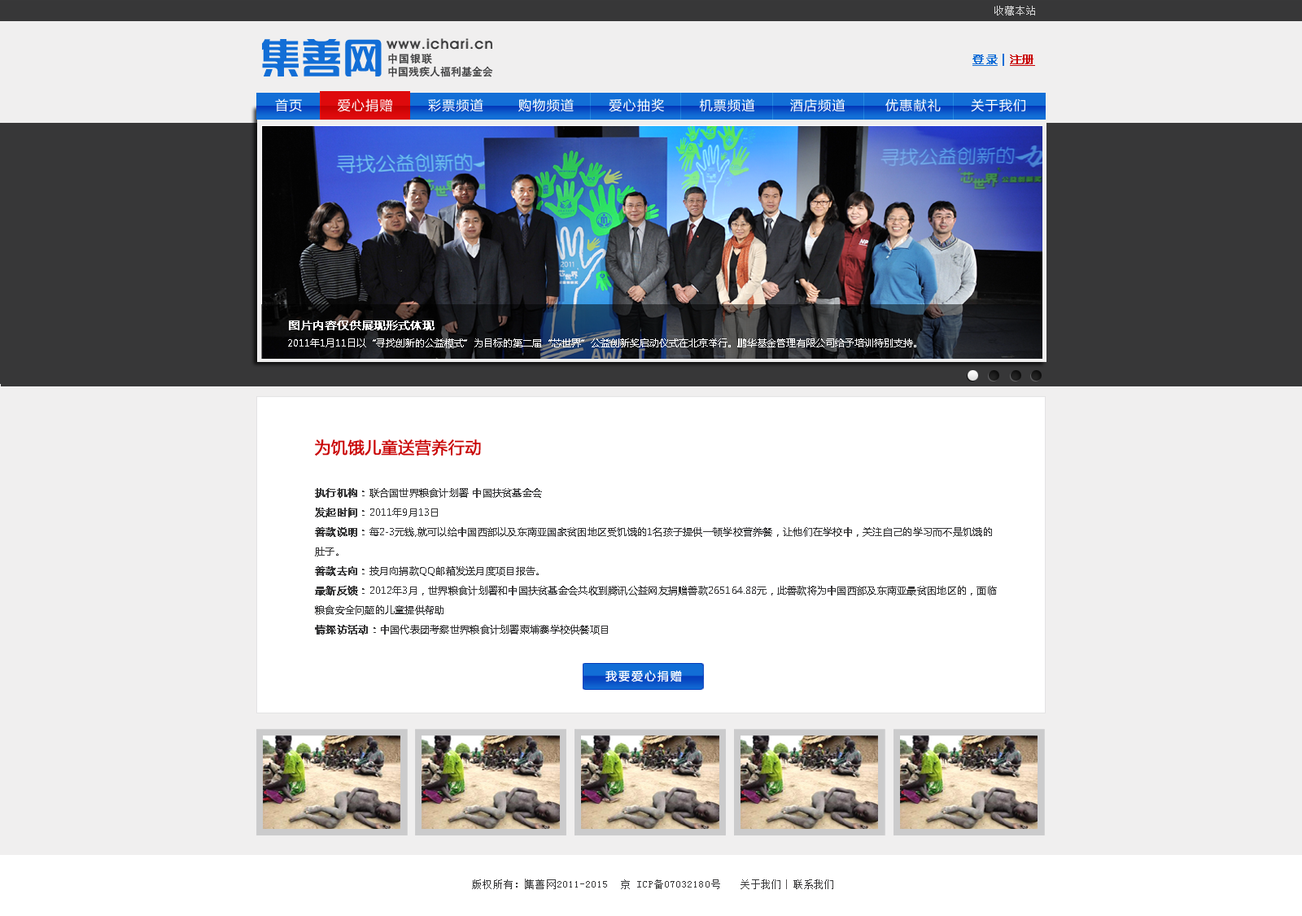
<style>
.page{position:relative;width:1302px;height:916px;background:#f0efef}
.page>*{position:absolute;margin:0}
.t1{font:9.8px "SimSun";letter-spacing:0.07em;color:#d7d7d7}
.t2{font:10.6px "HeitiCSEG-Medium-GB";letter-spacing:0.08em;color:#373738}
.t3{font:11.4px "MicrosoftYaHei";letter-spacing:0.01em;color:#126ed6;font-weight:bold;text-decoration:underline}
.t4{font:11.4px "MicrosoftYaHei";letter-spacing:0.01em;color:#126ed6;font-weight:bold}
.t5{font:11.4px "MicrosoftYaHei";letter-spacing:0.01em;color:#c90304;font-weight:bold;text-decoration:underline}
.t6{font:10.6px "HeitiCSEG-Medium-GB";color:#373738}
.t7{font:13px "MicrosoftYaHei";letter-spacing:0.08em;color:#ffffff}
.t8{font:11.4px "MicrosoftYaHei";color:#ffffff;font-weight:bold}
.t9{font:9.8px "MicrosoftYaHei";color:#ffffff}
.t10{font:16.3px "MicrosoftYaHei";color:#c90304;font-weight:bold}
.t11{font:9.8px/19.5px "MicrosoftYaHei";color:#373738}
.t12{font:9.8px/19.5px "MicrosoftYaHei";color:#373738;font-weight:bold}
.t13{font:11.4px "MicrosoftYaHei";letter-spacing:0.14em;color:#ffffff}
.t14{font:9.8px "SimSun";letter-spacing:0.09em;color:#373738}
.t15{font:9.8px "SimSun";letter-spacing:0.07em;color:#373738}
</style>
<div class="page">
<p class="t1" style="left:994px;top:6px;width:41px;height:9px">收藏本站</p>
<p class="t2" style="left:388px;top:53px;width:44px;height:11px">中国银联</p>
<p class="t3" style="left:972px;top:54px;width:63px;height:12px">登录<span class="t4"> | </span><span class="t5">注册</span></p>
<p class="t6" style="left:388px;top:66px;width:105px;height:11px">中国残疾人福利基金会</p>
<p class="t7" style="left:275px;top:98px;width:750px;height:14px">首页       爱心捐赠       彩票频道       购物频道       爱心抽奖       机票频道       酒店频道        优惠献礼      关于我们</p>
<p class="t8" style="left:289px;top:321px;width:145px;height:9px">图片内容仅供展现形式体现</p>
<p class="t9" style="left:288px;top:338px;width:628px;height:10px">2011年1月11日以“寻找创新的公益模式”为目标的第二届“芯世界”公益创新奖启动仪式在北京举行。鹏华基金管理有限公司给予培训特别支持。</p>
<p class="t10" style="left:315px;top:439px;width:166px;height:17px">为饥饿儿童送营养行动</p>
<p class="t11" style="left:315px;top:488px;width:682px;height:147px"><span class="t12">执行机构：</span>联合国世界粮食计划署 中国扶贫基金会<br><span class="t12">发起时间：</span>2011年9月13日<br><span class="t12">善款说明：</span>每2-3元钱,就可以给中国西部以及东南亚国家贫困地区受饥饿的1名孩子提供一顿学校营养餐，让他们在学校中，关注自己的学习而不是饥饿的肚子。<br><span class="t12">善款去向：</span>按月向捐款QQ邮箱发送月度项目报告。<br><span class="t12">最新反馈：</span>2012年3月，世界粮食计划署和中国扶贫基金会共收到腾讯公益网友捐赠善款265164.88元，此善款将为中国西部及东南亚最贫困地区的，面临粮食安全问题的儿童提供帮助<br><span class="t12">情探访活动：</span>中国代表团考察世界粮食计划署柬埔寨学校供餐项目</p>
<p class="t13" style="left:605px;top:670px;width:77px;height:12px">我要爱心捐赠</p>
<p class="t14" style="left:472px;top:879px;width:248px;height:10px">版权所有：集善网2011-2015  京 ICP备07032180号</p>
<p class="t15" style="left:740px;top:879px;width:93px;height:10px">关于我们  联系我们</p>
</div>
